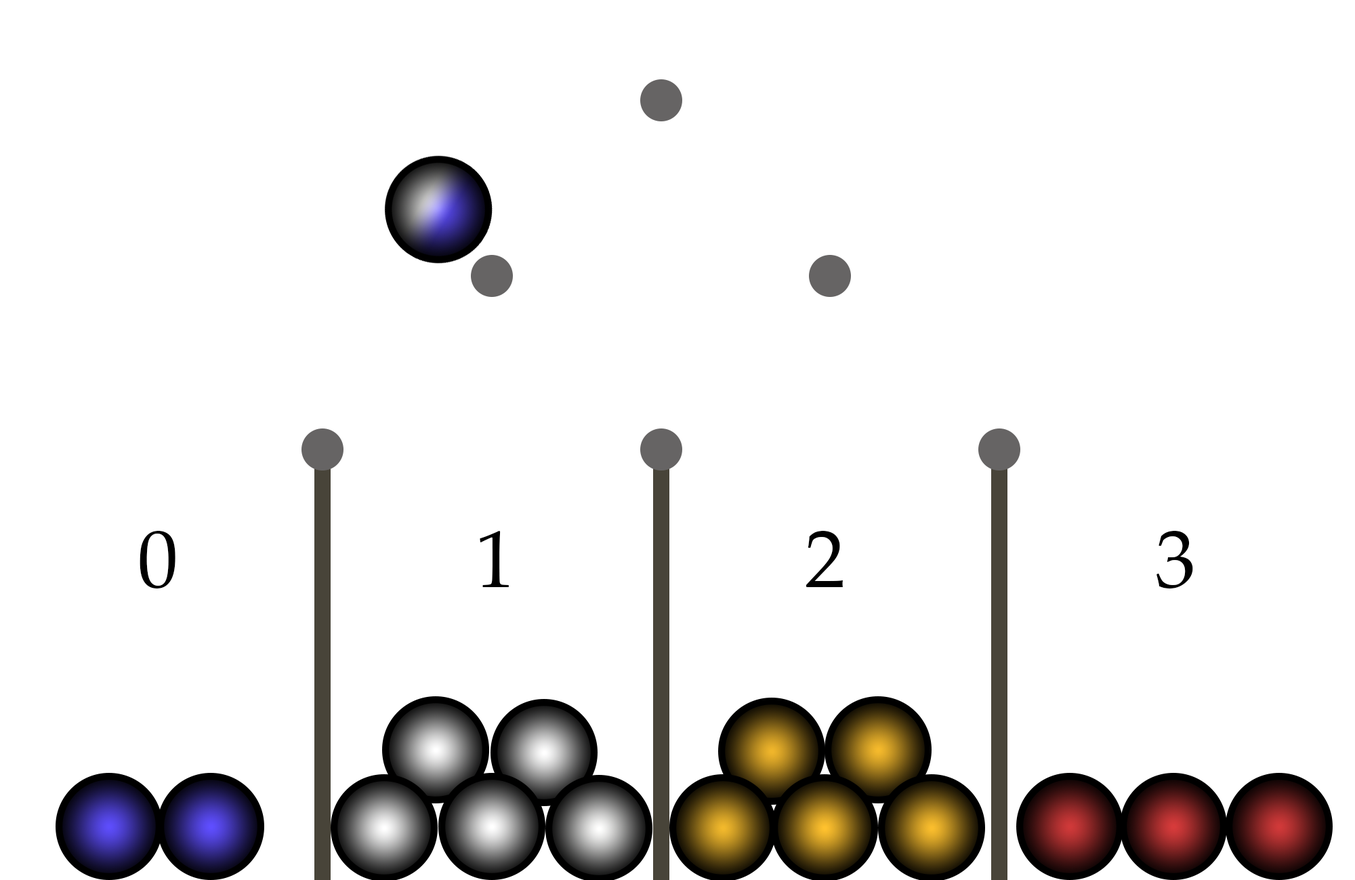
<style>
.page{position:relative;width:1355px;height:880px;background:#ffffff}
.page>*{position:absolute;margin:0}
.t1{font:81.3px "PalatinoLinotype-Roman";color:#000000}
</style>
<div class="page">
<p class="t1" style="left:140px;top:531px;width:36px;height:57px">0</p>
<p class="t1" style="left:480px;top:531px;width:29px;height:56px">1</p>
<p class="t1" style="left:807px;top:531px;width:36px;height:56px">2</p>
<p class="t1" style="left:1157px;top:531px;width:37px;height:57px">3</p>
</div>
